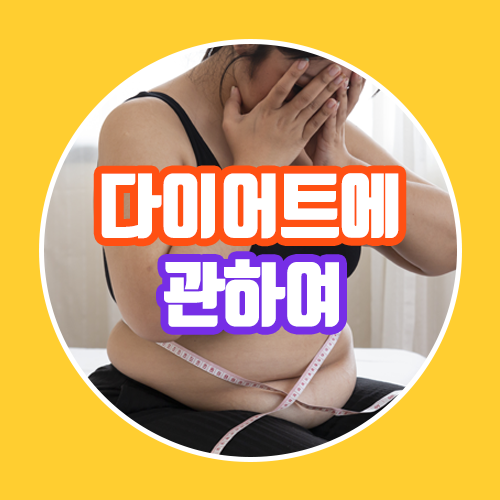
<style>
.page{position:relative;width:500px;height:500px;background:#ffce30}
.page>*{position:absolute;margin:0}
.t1{font:70px "TmonMonsoriOTFBlack";letter-spacing:-0.02em;color:#ffffff}
</style>
<div class="page">
<p class="t1" style="left:101px;top:173px;width:298px;height:66px">다이어트에</p>
<p class="t1" style="left:164px;top:259px;width:175px;height:68px">관하여</p>
</div>
